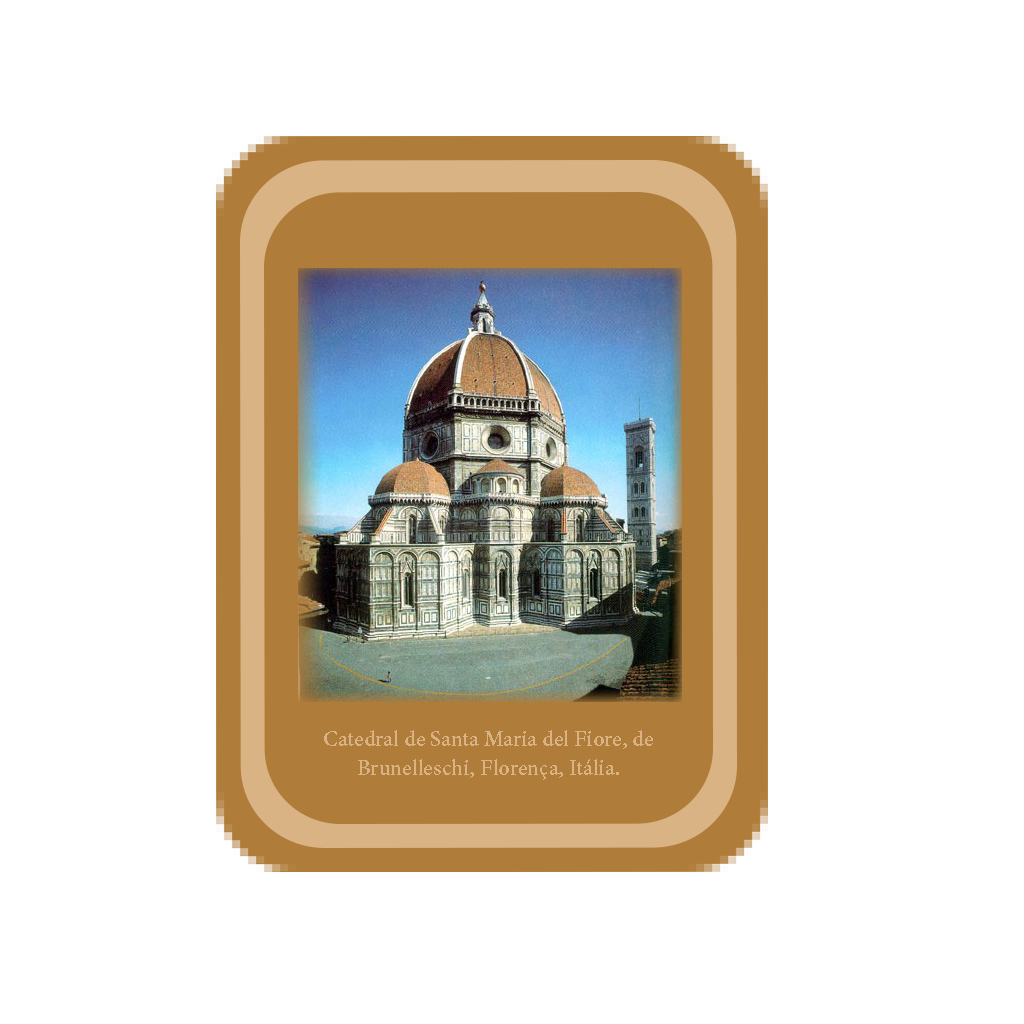
<style>
.page{position:relative;width:1024px;height:1024px;background:#ffffff}
.page>*{position:absolute;margin:0}
.t1{font:24.2px "AdobeDevanagari-Bold";color:#d9b383}
</style>
<div class="page">
<p class="t1" style="left:324px;top:730px;width:329px;height:50px;text-align:center">Catedral de Santa Maria del Fiore, de Brunelleschi, Florença, Itália.</p>
</div>
